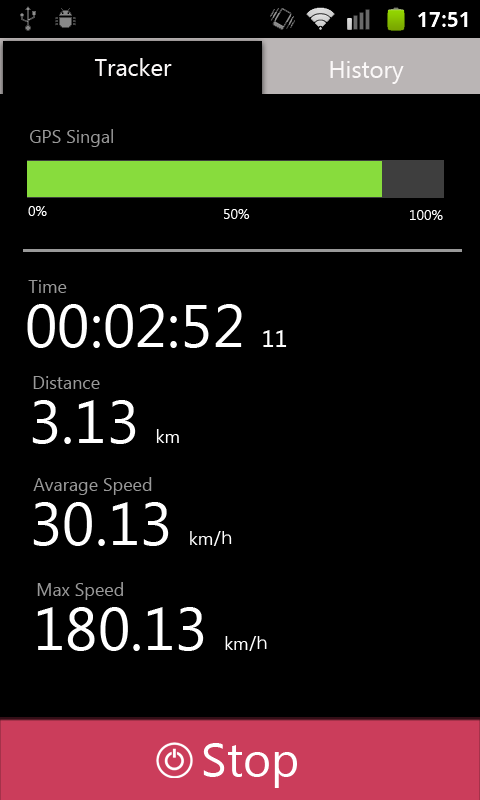
<style>
.page{position:relative;width:480px;height:800px;background:#000000}
.page>*{position:absolute;margin:0}
.t1{font:24px "SegoeUI";color:#fbf8f8}
.t2{font:18px "SegoeUI";color:#999999}
.t3{font:14px "SegoeUI";color:#ffffff}
.t4{font:60px "SegoeUI";color:#ffffff}
.t5{font:24px "SegoeUI";color:#ffffff}
.t6{font:18px "SegoeUI";color:#ffffff}
.t7{font:18px "STHeitiSC-Light";color:#ffffff}
.t8{font:48px "SegoeUI";color:#ffffff}
</style>
<div class="page">
<p class="t1" style="left:94px;top:58px;width:78px;height:18px">Tracker</p>
<p class="t1" style="left:330px;top:61px;width:74px;height:23px">History</p>
<p class="t2" style="left:30px;top:129px;width:83px;height:18px">GPS Singal</p>
<p class="t3" style="left:28px;top:206px;width:19px;height:10px">0%</p>
<p class="t3" style="left:224px;top:209px;width:26px;height:10px">50%</p>
<p class="t3" style="left:410px;top:210px;width:33px;height:10px">100%</p>
<p class="t2" style="left:28px;top:280px;width:39px;height:13px">Time</p>
<p class="t4" style="left:27px;top:304px;width:260px;height:44px">00:02:52 <span class="t5">11</span></p>
<p class="t2" style="left:33px;top:376px;width:67px;height:13px">Distance</p>
<p class="t4" style="left:32px;top:400px;width:147px;height:44px">3.13 <span class="t6">km</span></p>
<p class="t2" style="left:33px;top:477px;width:119px;height:18px">Avarage Speed</p>
<p class="t4" style="left:33px;top:502px;width:199px;height:44px">30.13 <span class="t6">km</span><span class="t7">/h</span></p>
<p class="t2" style="left:37px;top:582px;width:86px;height:18px">Max Speed</p>
<p class="t4" style="left:37px;top:607px;width:230px;height:44px">180.13 <span class="t6">km</span><span class="t7">/h</span></p>
<p class="t8" style="left:203px;top:743px;width:96px;height:34px">Start</p>
<p class="t8" style="left:203px;top:743px;width:94px;height:45px">Stop</p>
</div>
